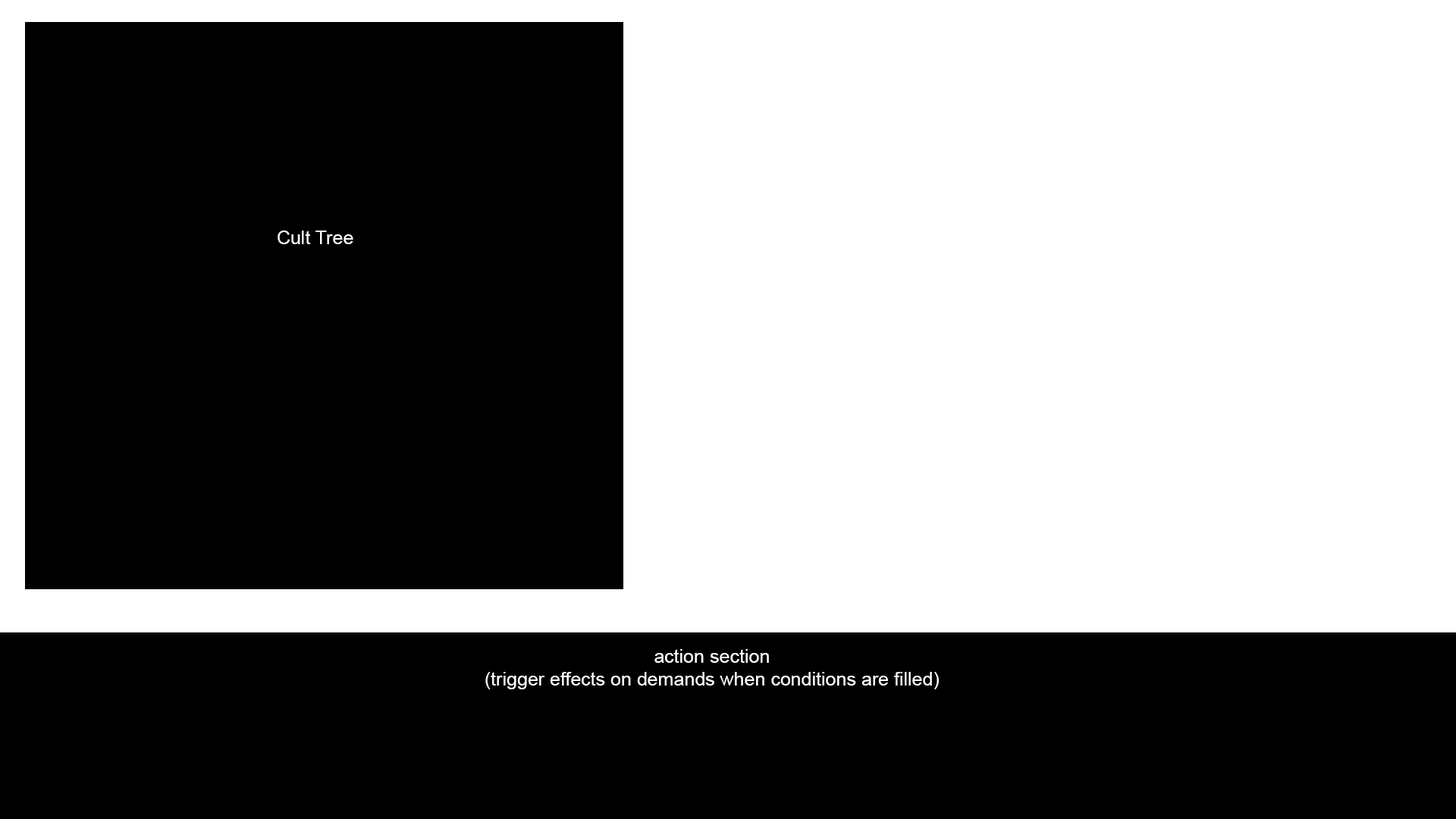
<style>
.page{position:relative;width:1456px;height:819px;background:#000000}
.page>*{position:absolute;margin:0}
.t1{font:19px "ArialMT";color:#ffffff}
</style>
<div class="page">
<p class="t1" style="left:278px;top:231px;width:75px;height:13px">Cult Tree</p>
<p class="t1" style="left:485px;top:649px;width:454px;height:40px;text-align:center">action section<br>(trigger effects on demands when conditions are filled)</p>
</div>
